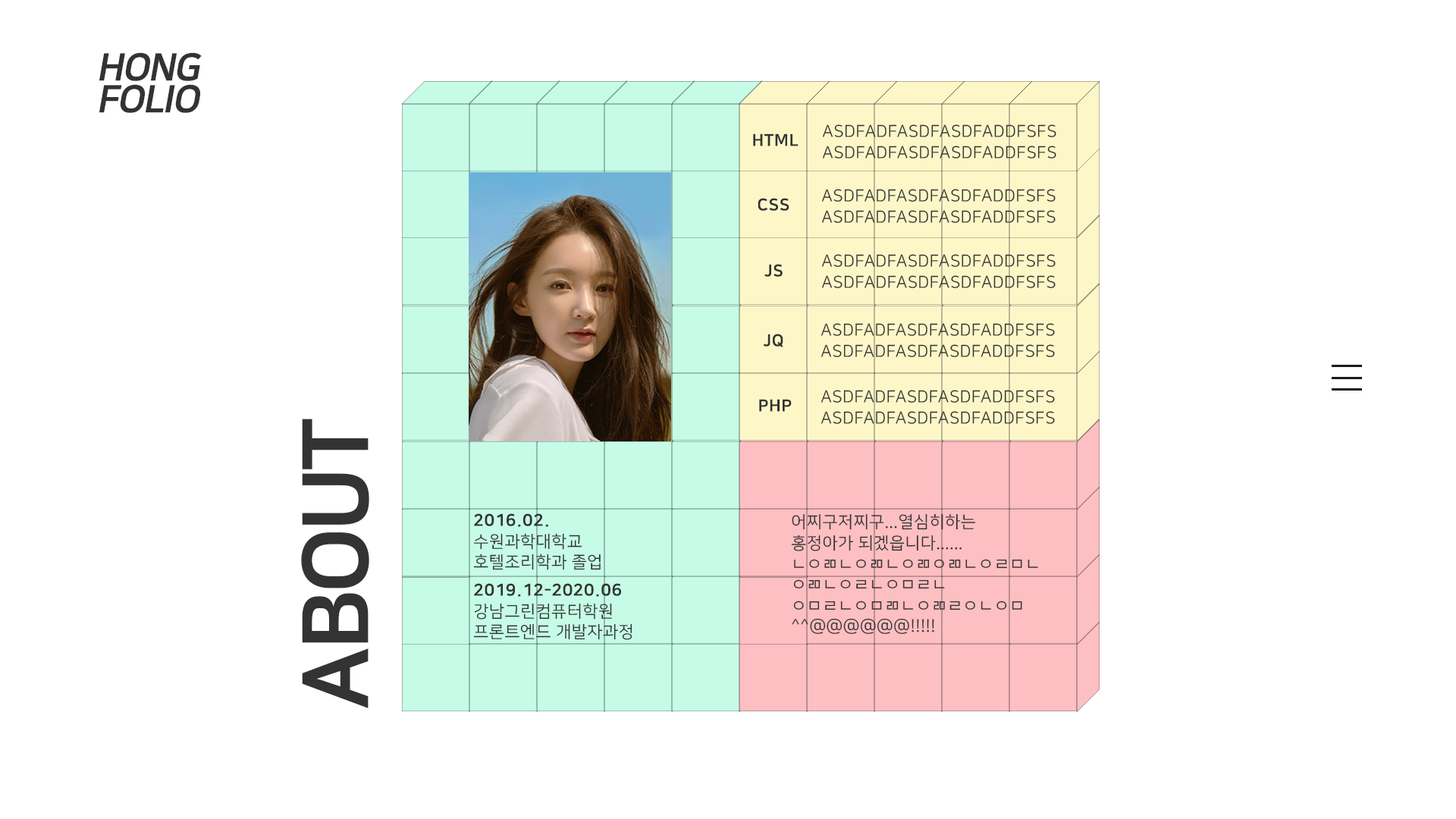
<style>
.page{position:relative;width:1456px;height:819px;background:#ffffff}
.page>*{position:absolute;margin:0}
.t1{font:37.9px/31.9px "NanumSquareEB";letter-spacing:-0.035em;color:#333333;font-style:italic}
.t2{font:16.6px/20.7px "NanumSquareR";letter-spacing:0.025em;color:#333333}
.t3{font:16.6px "NanumSquareEB";letter-spacing:0.025em;color:#333333}
.t4{font:91.2px "NanumSquareEB";letter-spacing:-0.035em;color:#333333}
.t5{font:16.6px/20.7px "NanumSquareEB";letter-spacing:0.025em;color:#333333}
</style>
<div class="page">
<p class="t1" style="left:99px;top:52px;width:103px;height:61px">HONG<br>FOLIO</p>
<p class="t2" style="left:822px;top:124px;width:234px;height:34px">ASDFADFASDFASDFADDFSFS<br>ASDFADFASDFASDFADDFSFS</p>
<p class="t3" style="left:753px;top:133px;width:46px;height:13px">HTML</p>
<p class="t3" style="left:758px;top:198px;width:31px;height:13px">CSS</p>
<p class="t2" style="left:821px;top:189px;width:235px;height:34px">ASDFADFASDFASDFADDFSFS<br>ASDFADFASDFASDFADDFSFS</p>
<p class="t2" style="left:821px;top:254px;width:235px;height:34px">ASDFADFASDFASDFADDFSFS<br>ASDFADFASDFASDFADDFSFS</p>
<p class="t3" style="left:764px;top:264px;width:19px;height:13px">JS</p>
<p class="t2" style="left:821px;top:323px;width:234px;height:34px">ASDFADFASDFASDFADDFSFS<br>ASDFADFASDFASDFADDFSFS</p>
<p class="t3" style="left:763px;top:334px;width:20px;height:13px">JQ</p>
<p class="t2" style="left:821px;top:390px;width:234px;height:34px">ASDFADFASDFASDFADDFSFS<br>ASDFADFASDFASDFADDFSFS</p>
<p class="t3" style="left:759px;top:399px;width:33px;height:13px">PHP</p>
<p class="t4" style="left:301px;top:419px;width:68px;height:289px;rotate:-90deg">ABOUT</p>
<p class="t2" style="left:473px;top:513px;width:128px;height:57px"><span class="t5">2016.02.<br></span>수원과학대학교<br>호텔조리학과 졸업</p>
<p class="t2" style="left:792px;top:513px;width:246px;height:121px">어찌구저찌구...열심히하는<br>홍정아가 되겠읍니다......<br>ㄴㅇㄻㄴㅇㄻㄴㅇㄻㅇㄻㄴㅇㄹㅁㄴ<br>ㅇㄻㄴㅇㄹㄴㅇㅁㄹㄴ<br>ㅇㅁㄹㄴㅇㅁㄻㄴㅇㄻㄹㅇㄴㅇㅁ<br>^^@@@@@@!!!!!</p>
<p class="t2" style="left:473px;top:583px;width:159px;height:57px"><span class="t5">2019.12-2020.06<br></span>강남그린컴퓨터학원<br>프론트엔드 개발자과정</p>
</div>
